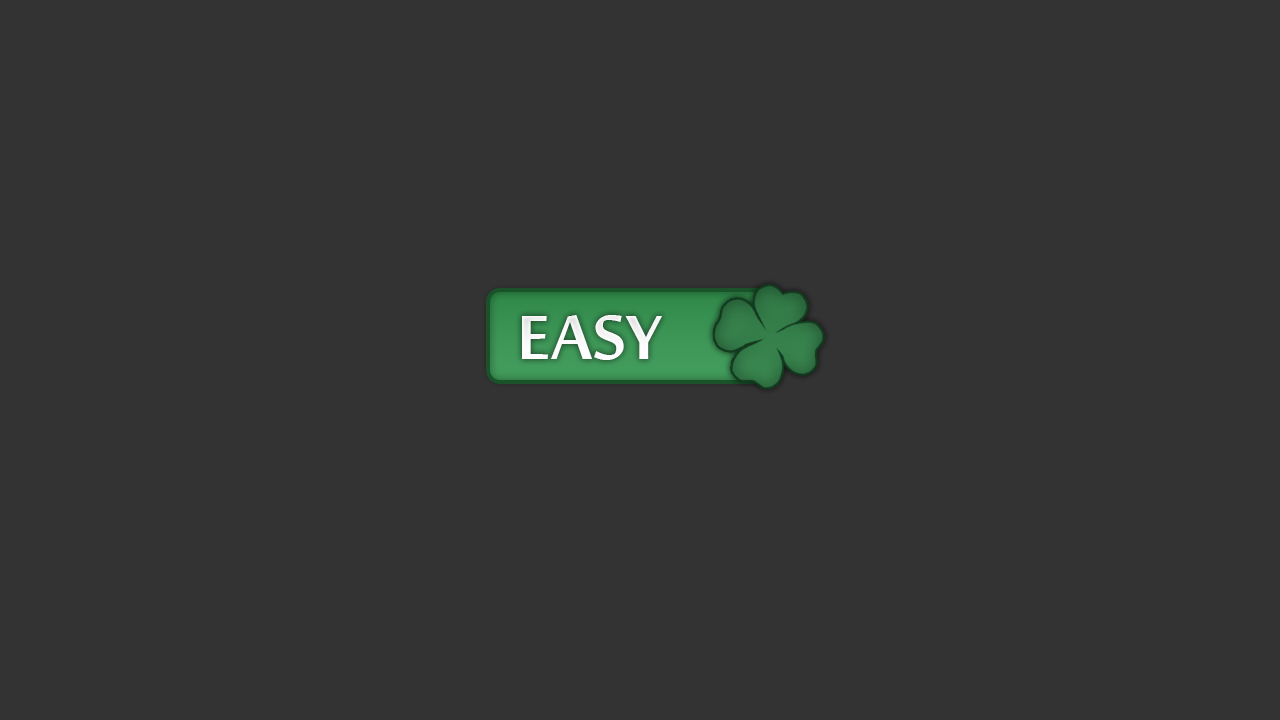
<style>
.page{position:relative;width:1280px;height:720px;background:#333333}
.page>*{position:absolute;margin:0}
.t1{font:84.7px "SakkalMajallaBold";letter-spacing:0.01em;color:#fafafa}
</style>
<div class="page">
<p class="t1" style="left:522px;top:315px;width:140px;height:45px">EASY</p>
</div>
